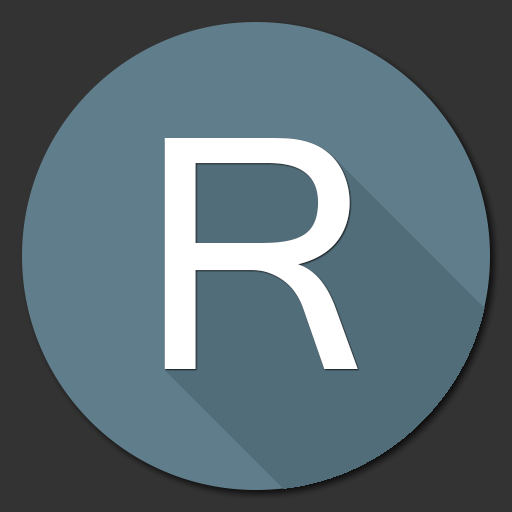
<style>
.page{position:relative;width:512px;height:512px;background:#607d8b}
.page>*{position:absolute;margin:0}
.t1{font:360px "Vrinda";color:#ffffff}
</style>
<div class="page">
<p class="t1" style="left:164px;top:138px;width:194px;height:231px">R</p>
</div>
